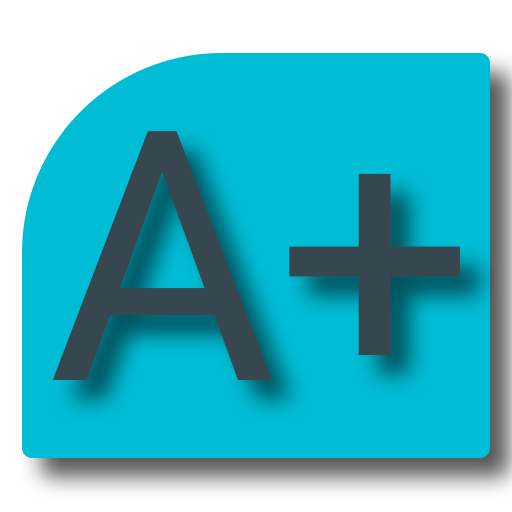
<style>
.page{position:relative;width:512px;height:512px;background:#00bcd4}
.page>*{position:absolute;margin:0}
.t1{font:350px "Roboto-Regular";color:#37474f}
</style>
<div class="page">
<p class="t1" style="left:52px;top:131px;width:408px;height:249px">A+</p>
</div>
